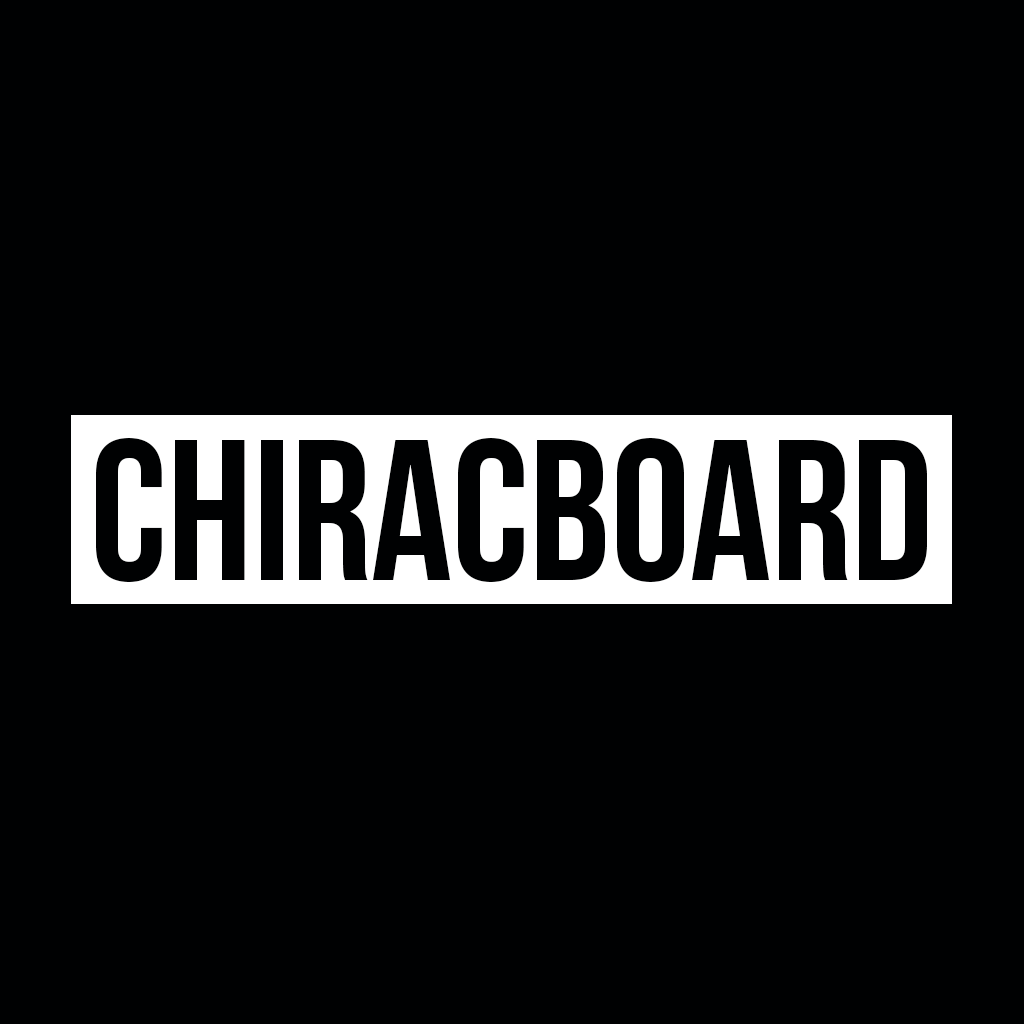
<style>
.page{position:relative;width:1024px;height:1024px;background:#000102}
.page>*{position:absolute;margin:0}
.t1{font:200px "BebasNeue";color:#000102}
</style>
<div class="page">
<p class="t1" style="left:96px;top:438px;width:831px;height:144px">ChiracBoard</p>
</div>
